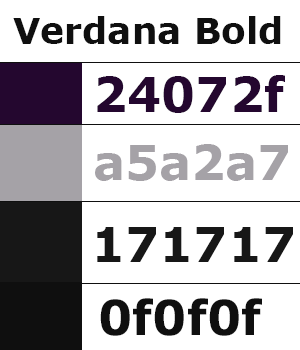
<style>
.page{position:relative;width:300px;height:350px;background:#ffffff}
.page>*{position:absolute;margin:0}
.t1{font:36px "Verdana-Bold";color:#0f0f0f}
.t2{font:48px "Verdana-Bold";color:#24072f}
.t3{font:48px "Verdana-Bold";color:#a5a2a7}
.t4{font:48px "Verdana-Bold";color:#171717}
.t5{font:48px "Verdana-Bold";color:#0f0f0f}
</style>
<div class="page">
<p class="t1" style="left:13px;top:16px;width:268px;height:28px">Verdana Bold</p>
<p class="t2" style="left:97px;top:75px;width:188px;height:38px">24072f</p>
<p class="t3" style="left:95px;top:144px;width:193px;height:37px">a5a2a7</p>
<p class="t4" style="left:97px;top:227px;width:196px;height:35px">171717</p>
<p class="t5" style="left:100px;top:298px;width:162px;height:38px">0f0f0f</p>
</div>
